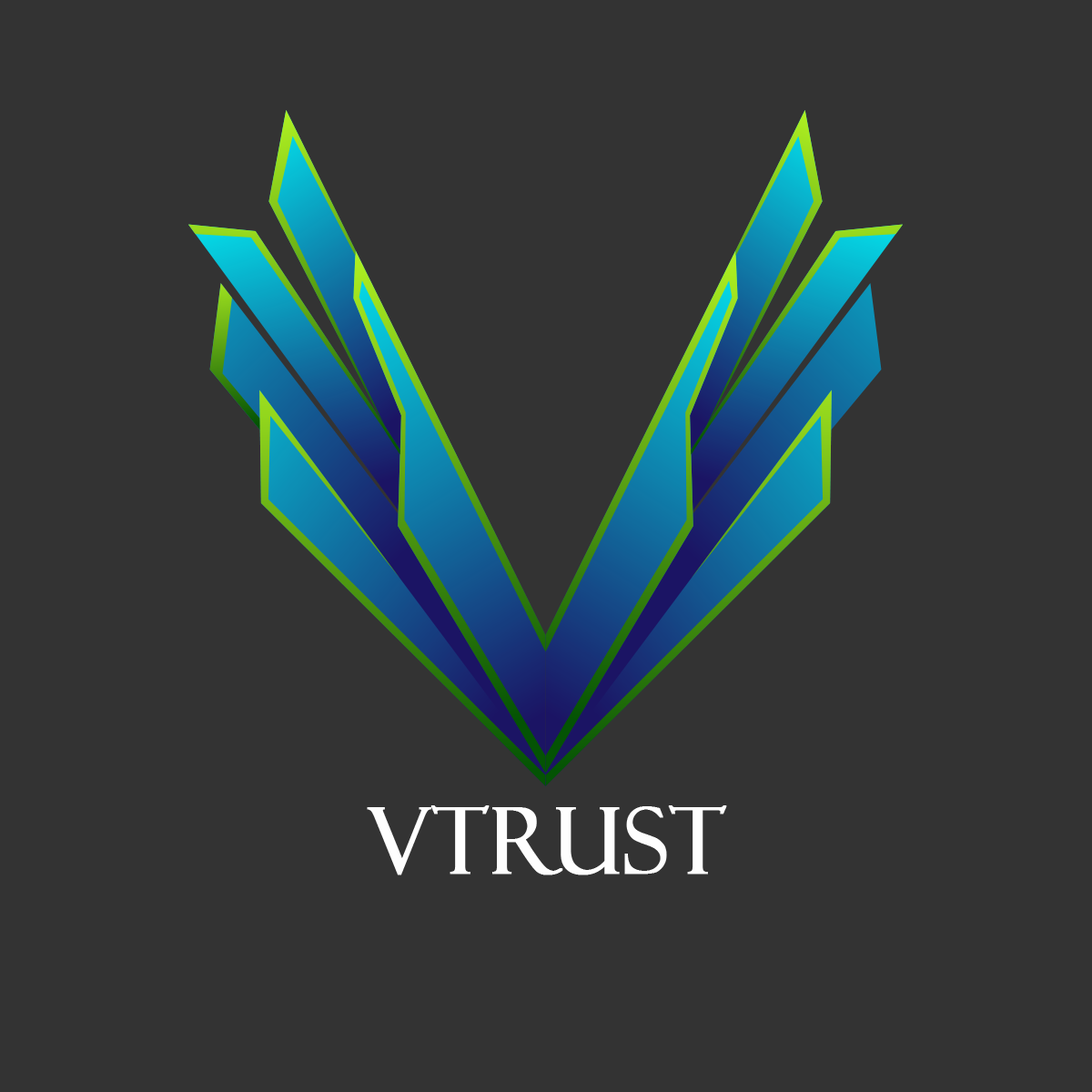
<style>
.page{position:relative;width:1092px;height:1092px;background:#333333}
.page>*{position:absolute;margin:0}
.t1{font:91px "FelixTitlingMT";color:#fefefe;font-weight:bold}
</style>
<div class="page">
<p class="t1" style="left:367px;top:805px;width:360px;height:70px">VTRUST</p>
</div>
